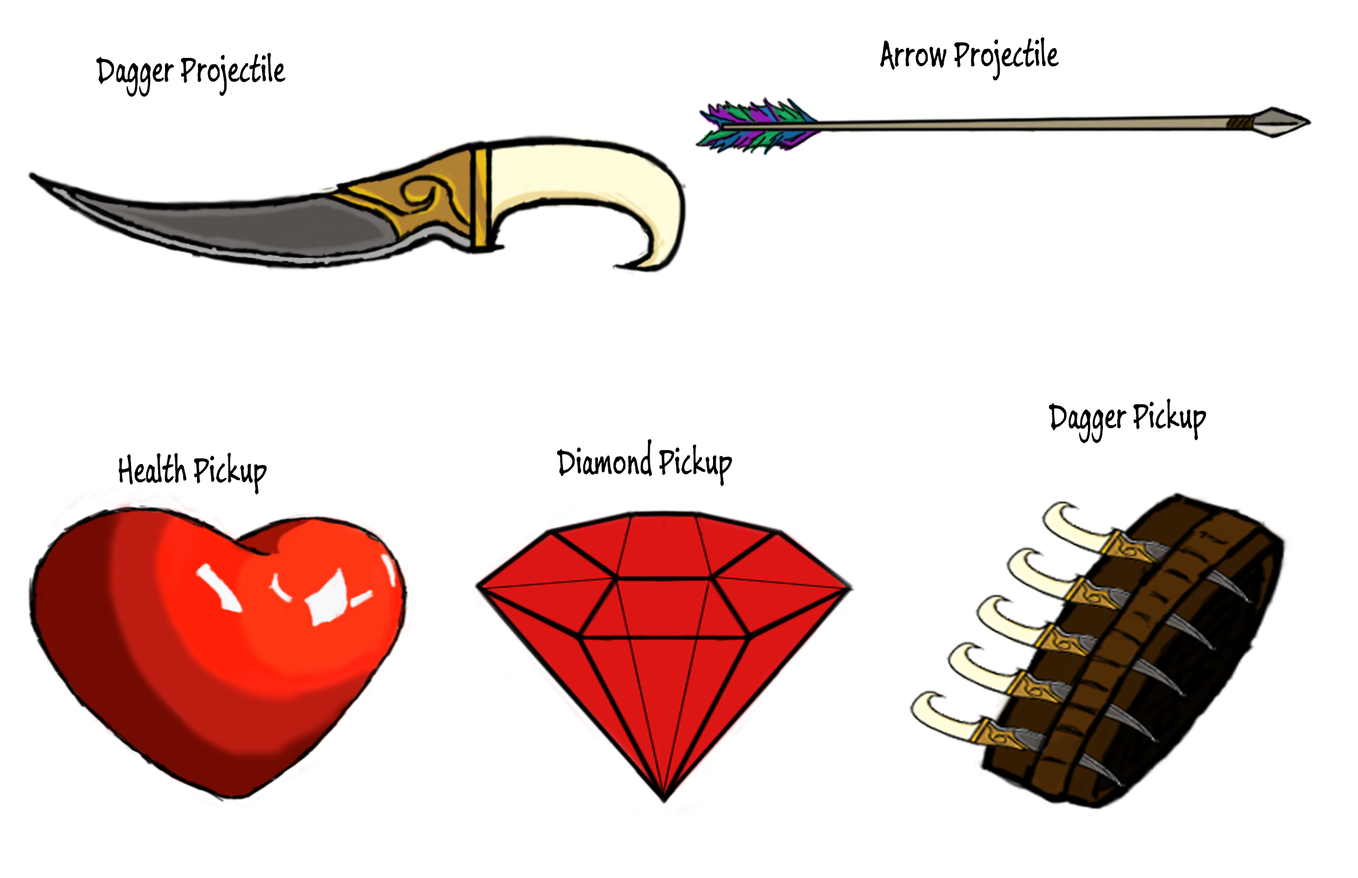
<style>
.page{position:relative;width:1358px;height:878px;background:#ffffff}
.page>*{position:absolute;margin:0}
.t1{font:40.2px "BuxtonSketch";color:#000000;scale:0.77 1}
</style>
<div class="page">
<p class="t1" style="left:880px;top:37px;width:178px;height:43px">Arrow Projectile</p>
<p class="t1" style="left:96px;top:53px;width:189px;height:44px">Dagger Projectile</p>
<p class="t1" style="left:1048px;top:399px;width:158px;height:44px">Dagger Pickup</p>
<p class="t1" style="left:557px;top:439px;width:175px;height:48px">Diamond Pickup</p>
<p class="t1" style="left:119px;top:453px;width:148px;height:42px">Health Pickup</p>
</div>
